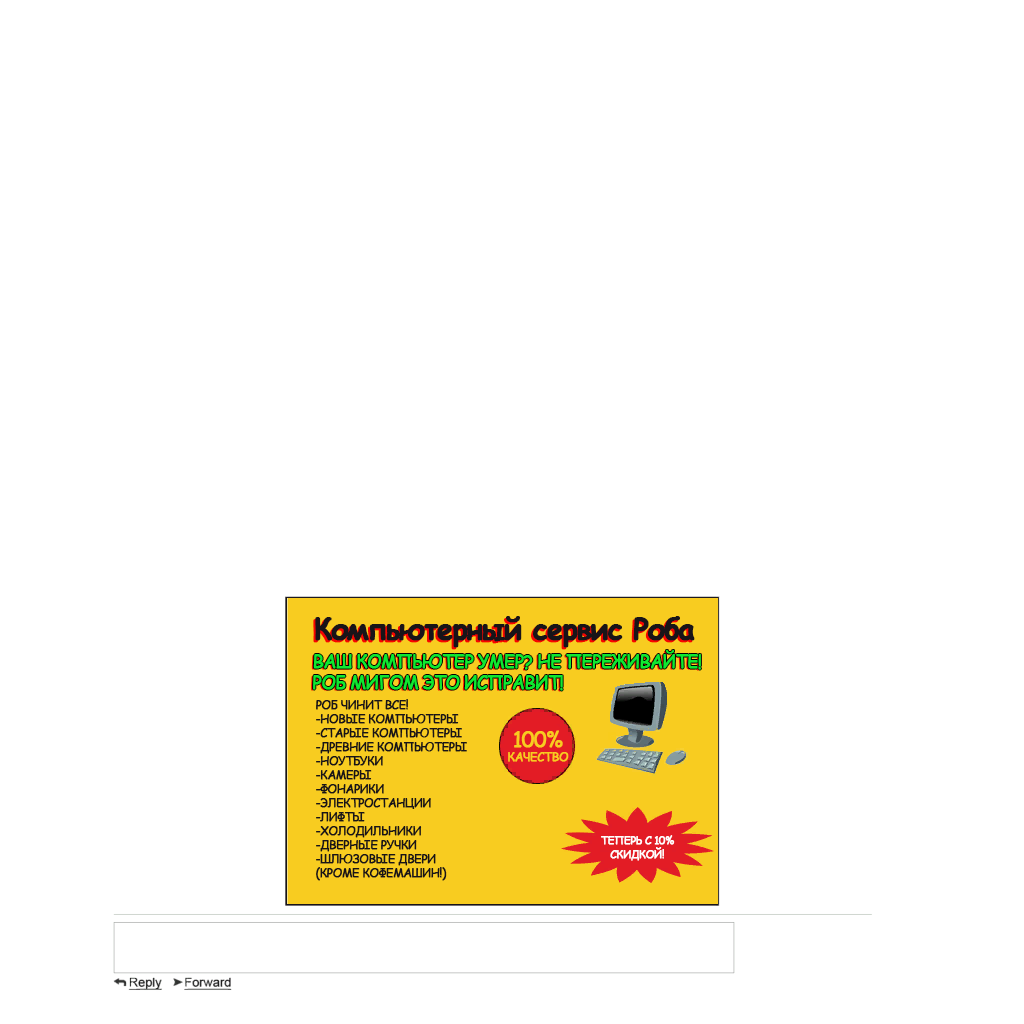
<style>
.page{position:relative;width:1024px;height:1024px;background:#ffffff}
.page>*{position:absolute;margin:0}
.t1{font:29px "ComicSansMS-Bold";letter-spacing:-0.06em;color:#181418;font-weight:bold}
.t2{font:29px "ComicSansMS-Bold";letter-spacing:-0.06em;font-weight:bold}
.t3{font:18px/44px "ComicSansMS";letter-spacing:-0.06em;color:#10e830;font-weight:bold}
.t4{font:18px/21px "ComicSansMS";letter-spacing:-0.06em;color:#10e830;font-weight:bold}
.t5{font:12px/14px "ComicSansMS";letter-spacing:-0.06em;color:#181418;font-weight:bold}
.t6{font:12px/14px "ComicSansMS";letter-spacing:-0.06em;color:#f8cc20;font-weight:bold}
.t7{font:21px/14px "ComicSansMS";letter-spacing:-0.06em;color:#f8cc20;font-weight:bold}
.t8{font:11px/14px "ComicSansMS";letter-spacing:-0.06em;color:#ffffff;font-weight:bold}
</style>
<div class="page">
<p class="t1" style="left:315px;top:616px;width:380px;height:32px">Компьютерный сервис Роба</p>
<p class="t2" style="left:313px;top:618px;width:380px;height:32px">Компьютерный сервис Роба</p>
<p class="t3" style="left:313px;top:650px;width:388px;height:41px">ВАШ КОМПЬЮТЕР УМЕР? НЕ ПЕРЕЖИВАЙТЕ!<br><span class="t4">РОБ МИГОМ ЭТО ИСПРАВИТ!</span></p>
<p class="t5" style="left:316px;top:699px;width:151px;height:182px">РОБ ЧИНИТ ВСЕ!<br>-НОВЫЕ КОМПЬЮТЕРЫ<br>-СТАРЫЕ КОМПЬЮТЕРЫ<br>-ДРЕВНИЕ КОМПЬЮТЕРЫ<br>-НОУТБУКИ<br>-КАМЕРЫ<br>-ФОНАРИКИ<br>-ЭЛЕКТРОСТАНЦИИ<br>-ЛИФТЫ<br>-ХОЛОДИЛЬНИКИ<br>-ДВЕРНЫЕ РУЧКИ<br>-ШЛЮЗОВЫЕ ДВЕРИ<br>(КРОМЕ КОФЕМАШИН!)</p>
<p class="t6" style="left:508px;top:730px;width:61px;height:32px;text-align:center"><span class="t7">100%<br></span>КАЧЕСТВО</p>
<p class="t8" style="left:601px;top:835px;width:74px;height:26px;text-align:center">ТЕПЕРЬ С 10%<br>СКИДКОЙ!</p>
</div>
